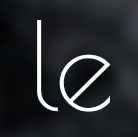
<style>
.page{position:relative;width:138px;height:137px}
.page>*{position:absolute;margin:0}
.t1{font:120px "PoiretOne-Regular";color:#ffffff}
</style>
<div class="page">
<p class="t1" style="left:37px;top:20px;width:74px;height:92px">le</p>
</div>
